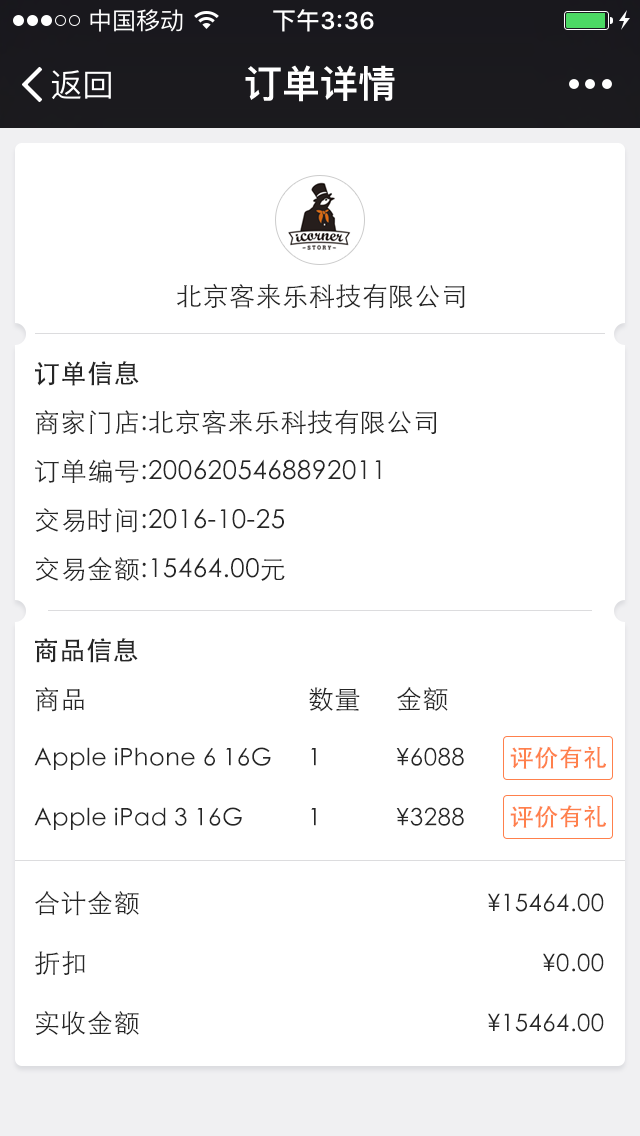
<style>
.page{position:relative;width:640px;height:1136px;background:#ffffff}
.page>*{position:absolute;margin:0}
.t1{font:38px "PingFangSC-Semibold";color:#ffffff}
.t2{font:26px "STHeitiSC-Light";letter-spacing:0.02em;color:#262626}
.t3{font:26px "STHeitiSC-Medium";letter-spacing:0.02em;color:#262626}
.t4{font:26px/49px "STHeitiSC-Light";letter-spacing:0.02em;color:#262626}
.t5{font:24px/60px "STHeitiSC-Light";letter-spacing:0.02em;color:#262626}
.t6{font:26px/60px "STHeitiSC-Light";letter-spacing:0.02em;color:#262626}
.t7{font:24px "STHeitiSC-Medium";letter-spacing:0.02em;color:#ff804c}
</style>
<div class="page">
<p class="t1" style="left:245px;top:65px;width:150px;height:37px">订单详情</p>
<p class="t2" style="left:177px;top:283px;width:288px;height:26px">北京客来乐科技有限公司</p>
<p class="t3" style="left:35px;top:361px;width:104px;height:25px">订单信息</p>
<p class="t4" style="left:35px;top:409px;width:402px;height:173px">商家门店:北京客来乐科技有限公司<br>订单编号:2006205468892011<br>交易时间:2016-10-25<br>交易金额:15464.00元</p>
<p class="t3" style="left:35px;top:638px;width:103px;height:25px">商品信息</p>
<p class="t5" style="left:34px;top:687px;width:237px;height:143px"><span class="t6">商品<br></span>Apple iPhone 6 16G<br>Apple iPad 3 16G</p>
<p class="t5" style="left:309px;top:687px;width:51px;height:139px"><span class="t6">数量<br></span>1<br>1</p>
<p class="t5" style="left:396px;top:686px;width:68px;height:140px"><span class="t6">金额<br></span>¥6088<br>¥3288</p>
<p class="t7" style="left:510px;top:746px;width:96px;height:23px">评价有礼</p>
<p class="t7" style="left:510px;top:805px;width:96px;height:23px">评价有礼</p>
<p class="t6" style="left:35px;top:890px;width:104px;height:146px">合计金额<br>折扣<br>实收金额</p>
<p class="t5" style="left:488px;top:893px;width:116px;height:139px;text-align:right">¥15464.00<br>¥0.00<br>¥15464.00</p>
</div>
